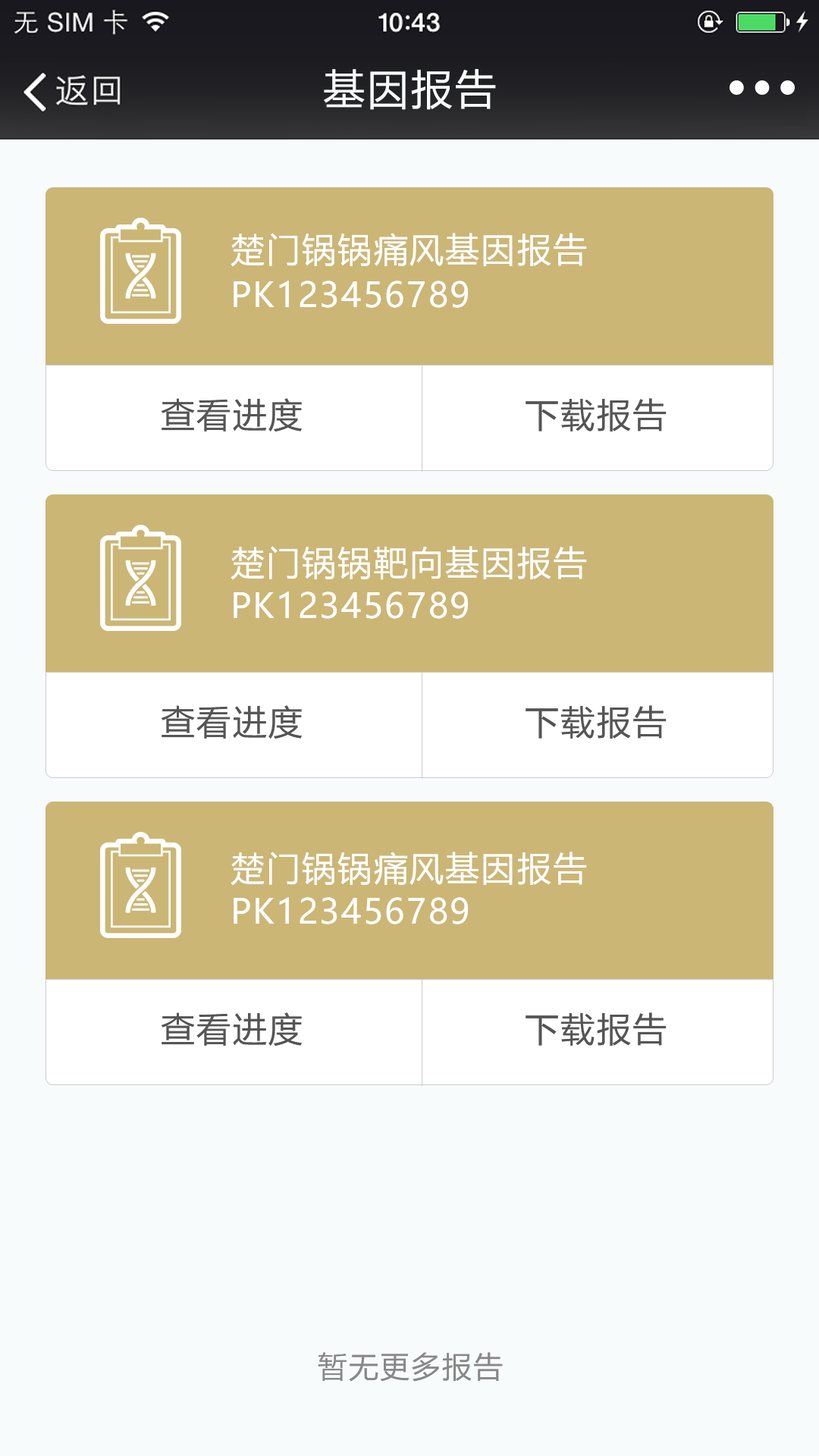
<style>
.page{position:relative;width:819px;height:1456px;background:#f8fbfc}
.page>*{position:absolute;margin:0}
.t1{font:41.7px "MicrosoftYaHei";letter-spacing:0.05em;color:#f8fbfc}
.t2{font:34.1px "MicrosoftYaHei";letter-spacing:0.05em;color:#ffffff}
.t3{font:34.1px "MicrosoftYaHei";letter-spacing:0.05em;color:#555555}
.t4{font:29.6px "MicrosoftYaHei";letter-spacing:0.05em;color:#888888}
</style>
<div class="page">
<p class="t1" style="left:324px;top:69px;width:172px;height:41px">基因报告</p>
<p class="t2" style="left:231px;top:233px;width:356px;height:34px">楚门锅锅痛风基因报告</p>
<p class="t2" style="left:234px;top:281px;width:234px;height:27px">PK123456789</p>
<p class="t3" style="left:161px;top:398px;width:141px;height:33px">查看进度</p>
<p class="t3" style="left:526px;top:398px;width:141px;height:33px">下载报告</p>
<p class="t2" style="left:231px;top:546px;width:356px;height:34px">楚门锅锅靶向基因报告</p>
<p class="t2" style="left:234px;top:591px;width:234px;height:28px">PK123456789</p>
<p class="t3" style="left:161px;top:705px;width:141px;height:34px">查看进度</p>
<p class="t3" style="left:526px;top:705px;width:141px;height:34px">下载报告</p>
<p class="t2" style="left:231px;top:852px;width:356px;height:34px">楚门锅锅痛风基因报告</p>
<p class="t2" style="left:234px;top:897px;width:234px;height:27px">PK123456789</p>
<p class="t3" style="left:161px;top:1012px;width:141px;height:34px">查看进度</p>
<p class="t3" style="left:526px;top:1012px;width:141px;height:34px">下载报告</p>
<p class="t4" style="left:318px;top:1352px;width:185px;height:30px">暂无更多报告</p>
</div>
